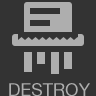
<style>
.page{position:relative;width:96px;height:96px;background:#333333}
.page>*{position:absolute;margin:0}
.t1{font:18px "HelveticaNeueLTStd-Roman";color:#aeaeae;text-transform:uppercase}
</style>
<div class="page">
<p class="t1" style="left:9px;top:83px;width:81px;height:14px">DESTROY</p>
</div>
